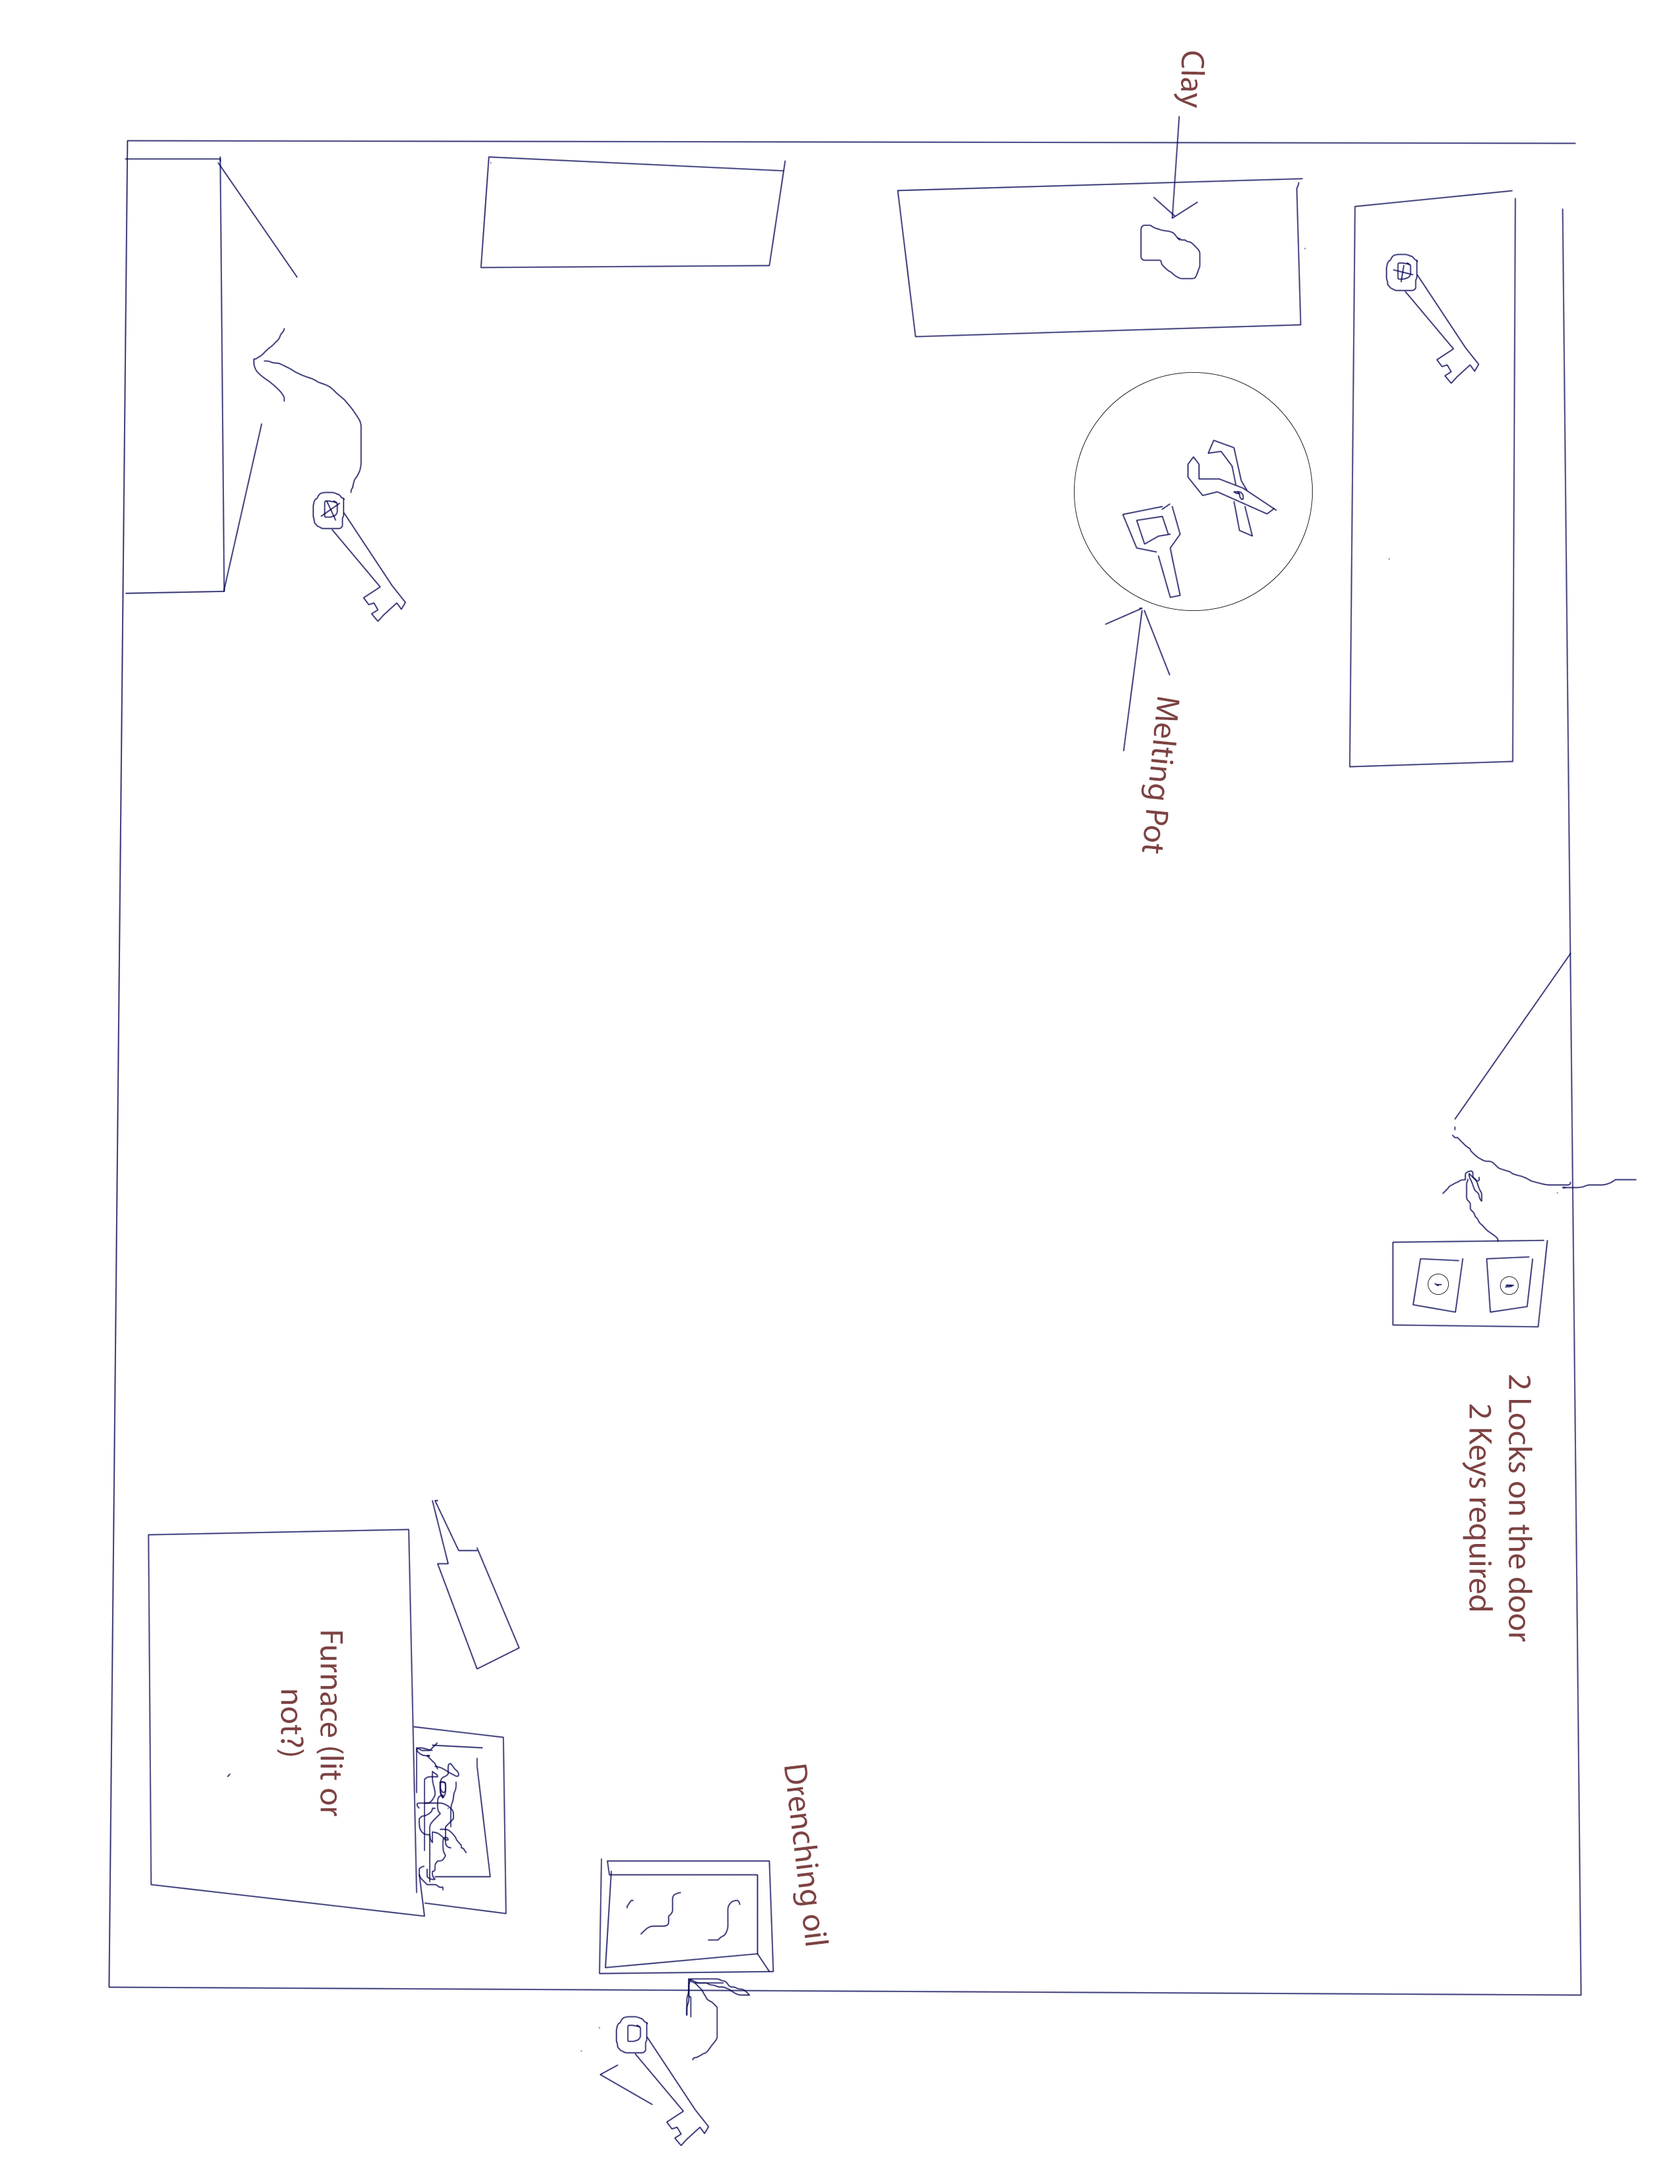
<style>
.page{position:relative;width:1677px;height:2170px;background:#ffffff}
.page>*{position:absolute;margin:0}
.t1{font:7.9px "MyriadPro-Regular";color:#7e4242}
</style>
<div class="page">
<p class="t1" style="left:1174px;top:51px;width:31px;height:57px;rotate:91deg">Clay</p>
<p class="t1" style="left:1141px;top:697px;width:39px;height:156px;rotate:96deg">Melting Pot</p>
<p class="t1" style="left:1462px;top:1375px;width:70px;height:267px;text-align:center;rotate:90deg">2 Locks on the door <br>2 Keys required</p>
<p class="t1" style="left:277px;top:1631px;width:67px;height:185px;text-align:center;rotate:90deg">Furnace (lit or not?)<br>v</p>
<p class="t1" style="left:784px;top:1764px;width:45px;height:182px;rotate:83deg">Drenching oil</p>
</div>
